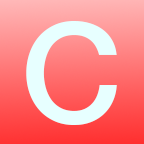
<style>
.page{position:relative;width:144px;height:144px}
.page>*{position:absolute;margin:0}
.t1{font:140.2px "HelveticaNeue-Medium";letter-spacing:-0.05em;color:#e7ffff}
</style>
<div class="page">
<p class="t1" style="left:26px;top:21px;width:91px;height:104px">C</p>
</div>
